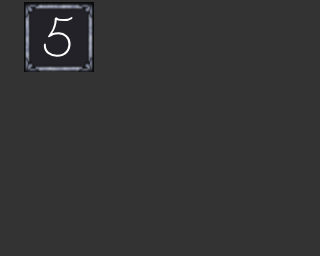
<style>
.page{position:relative;width:320px;height:256px;background:#333333}
.page>*{position:absolute;margin:0}
.t1{font:43px "BadScript-Regular";color:#ffffff}
</style>
<div class="page">
<p class="t1" style="left:43px;top:16px;width:30px;height:41px">5</p>
</div>
